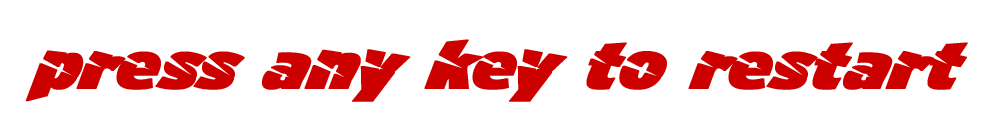
<style>
.page{position:relative;width:988px;height:138px;background:#ffffff}
.page>*{position:absolute;margin:0}
.t1{font:72px "A-Cuchillada";color:#cd0000;font-weight:bold;font-style:italic}
</style>
<div class="page">
<p class="t1" style="left:25px;top:39px;width:943px;height:63px">press any key to restart</p>
</div>
